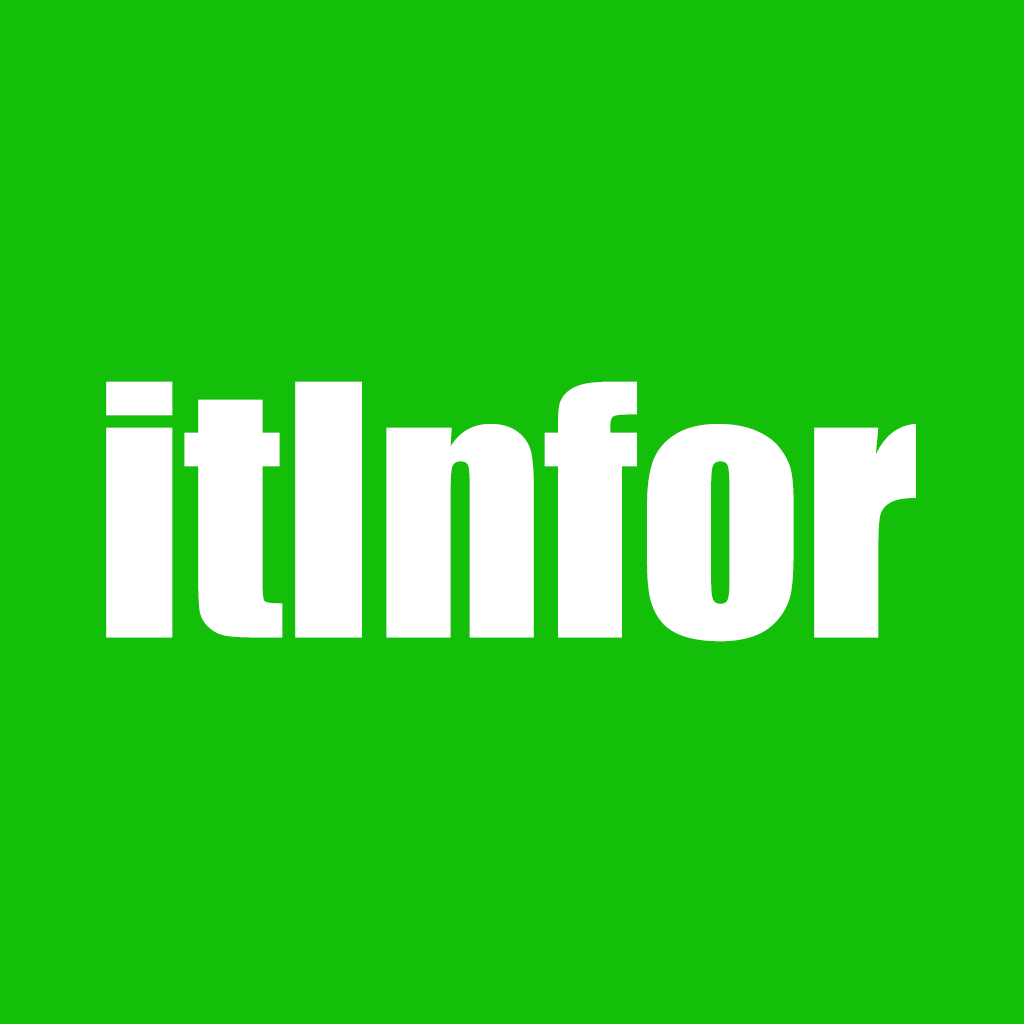
<style>
.page{position:relative;width:1024px;height:1024px;background:#14bf0a}
.page>*{position:absolute;margin:0}
.t1{font:323.2px "Impact";color:#ffffff}
</style>
<div class="page">
<p class="t1" style="left:106px;top:381px;width:810px;height:261px">itInfor</p>
</div>
